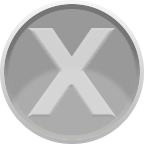
<style>
.page{position:relative;width:144px;height:144px;background:#999999}
.page>*{position:absolute;margin:0}
.t1{font:126.8px "Gotham-Bold";letter-spacing:-0.01em;color:#e0e0e0;scale:1.05 1}
</style>
<div class="page">
<p class="t1" style="left:27px;top:28px;width:90px;height:89px">X</p>
</div>
